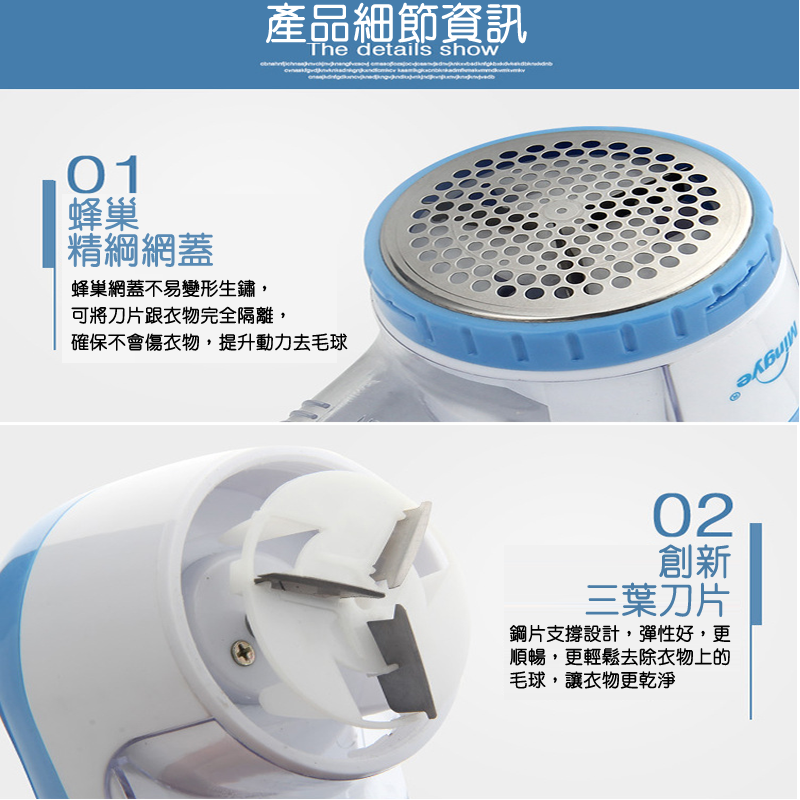
<style>
.page{position:relative;width:800px;height:800px}
.page>*{position:absolute;margin:0}
.t1{font:42.9px "HanWangYenLight";color:#ffffff;font-weight:bold}
.t2{font:36px "HanWangYenLight";color:#588ab4;font-weight:bold}
.t3{font:18px "HanWangYenLight";color:#000000;font-weight:bold}
.t4{font:36px "HanWangYenLight";color:#4a7da7;font-weight:bold}
</style>
<div class="page">
<p class="t1" style="left:266px;top:2px;width:261px;height:42px">產品細節資訊</p>
<p class="t2" style="left:67px;top:196px;width:146px;height:71px">蜂巢<br>精綱網蓋</p>
<p class="t3" style="left:71px;top:279px;width:277px;height:72px">蜂巢網蓋不易變形生鏽，<br>可將刀片跟衣物完全隔離，<br>確保不會傷衣物，提升動力去毛球</p>
<p class="t4" style="left:585px;top:544px;width:146px;height:74px;text-align:right">創新<br>三葉刀片</p>
<p class="t3" style="left:509px;top:624px;width:222px;height:65px">鋼片支撐設計，彈性好，更<br>順暢，更輕鬆去除衣物上的<br>毛球，讓衣物更乾淨</p>
</div>
